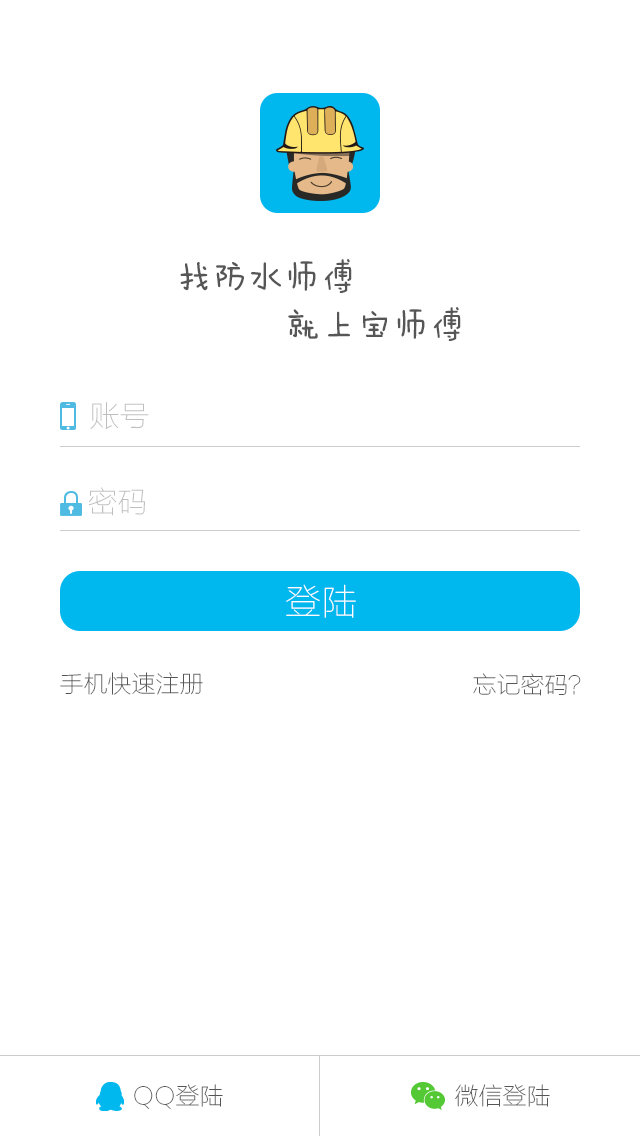
<style>
.page{position:relative;width:640px;height:1136px;background:#ffffff}
.page>*{position:absolute;margin:0}
.t1{font:36px/48px "FZMWJW--GB1-0";color:#565656}
.t2{font:30px "FZLTCXHJW--GB1-0";color:#bebebe}
.t3{font:36px "FZLTCXHJW--GB1-0";color:#ffffff}
.t4{font:24px "FZLTCXHJW--GB1-0";color:#565656}
</style>
<div class="page">
<p class="t1" style="left:180px;top:259px;width:281px;height:82px;text-align:center">找防水师傅<br>                 就上宝师傅</p>
<p class="t2" style="left:90px;top:402px;width:59px;height:28px">账号</p>
<p class="t2" style="left:88px;top:487px;width:57px;height:29px">密码</p>
<p class="t3" style="left:286px;top:584px;width:70px;height:34px">登陆</p>
<p class="t4" style="left:60px;top:672px;width:143px;height:23px">手机快速注册</p>
<p class="t4" style="left:473px;top:673px;width:108px;height:23px">忘记密码？</p>
<p class="t4" style="left:134px;top:1084px;width:89px;height:26px">QQ登陆</p>
<p class="t4" style="left:455px;top:1084px;width:95px;height:23px">微信登陆</p>
</div>
